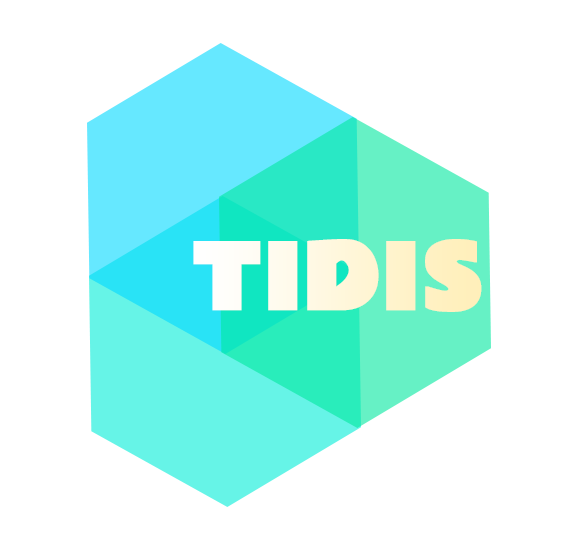
<style>
.page{position:relative;width:580px;height:550px;background:#ffffff}
.page>*{position:absolute;margin:0}
.t1{font:87.4px "RammettoOne-Regular";text-transform:uppercase;font-weight:bold}
</style>
<div class="page">
<p class="t1" style="left:193px;top:239px;width:289px;height:73px">TIDIS</p>
</div>
